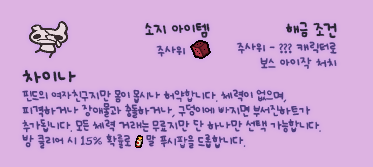
<style>
.page{position:relative;width:373px;height:167px;background:#ddb3e2}
.page>*{position:absolute;margin:0}
.t1{font:12px "UhBeeSe_hyunBold";color:#2b2636}
.t2{font:12px "UhBeeSe_hyunBold";letter-spacing:-0.1em;color:#2b2636}
.t3{font:12px "UhBeeSe_hyunBold";letter-spacing:-0.15em;color:#2b2636}
.t4{font:10px/14.5px "UhBeeSe_hyunBold";color:#4e3d7c}
.t5{font:10px "UhBeeSe_hyunBold";color:#4e3d7c}
.t6{font:10px/15px "UhBeeSe_hyunBold";letter-spacing:-0.05em;color:#4e3d7c}
.t7{font:16px/21px "UhBeeSe_hyunBold";color:#2b2636}
.t8{font:10px/15px "UhBeeSe_hyun";letter-spacing:-0.05em;color:#4e3d7c}
.t9{font:10px/15px "UhBeeSe_hyunBold";color:#4e3d7c}
.t10{font:10px/15px "UhBeeSe_hyun";letter-spacing:-0.1em;color:#4e3d7c}
.t11{font:10px/15px "UhBeeSe_hyunBold";letter-spacing:-0.15em;color:#4e3d7c}
.t12{font:10px/15px "UhBeeSe_hyunBold";letter-spacing:-0.025em;color:#4e3d7c}
.t13{font:10px/15px "Font_soulsV2_Title-Regular";letter-spacing:-0.025em;color:#4e3d7c}
.t14{font:10px/15px "UhBeeSe_hyun";letter-spacing:-0.025em;color:#4e3d7c}
</style>
<div class="page">
<p class="t1" style="left:145px;top:23px;width:65px;height:15px"><span class="t2">소</span>지 아이템</p>
<p class="t1" style="left:285px;top:21px;width:52px;height:18px">해금 <span class="t3">조</span>건</p>
<p class="t4" style="left:236px;top:41px;width:101px;height:28px;text-align:right">주사위 - ??? 캐릭터로<br>보스 아이작 처치</p>
<p class="t5" style="left:156px;top:45px;width:30px;height:12px">주사위</p>
<p class="t6" style="left:22px;top:70px;width:299px;height:79px"><span class="t7">차이나<br></span>핀드의 여자친구지만 몸이 몹시나 허약<span class="t8">합</span><span class="t9">니</span>다. 체력이 없으며, 피격하거나 장애물<span class="t8">과</span> 충돌하거나, 구덩이에 <span class="t10">빠</span>지면 부서진하트가<br><span class="t11">추</span>가<span class="t9">됩니</span>다. 모든 체력 거래는 무료지만 단 하나만 선택 가능합니다.<br><span class="t12">방 클리어 시 </span><span class="t13">15%</span><span class="t12"> 확</span><span class="t14">률</span><span class="t12">로    말 푸시</span><span class="t14">팝</span><span class="t12">을 드롭합니다.</span></p>
</div>
